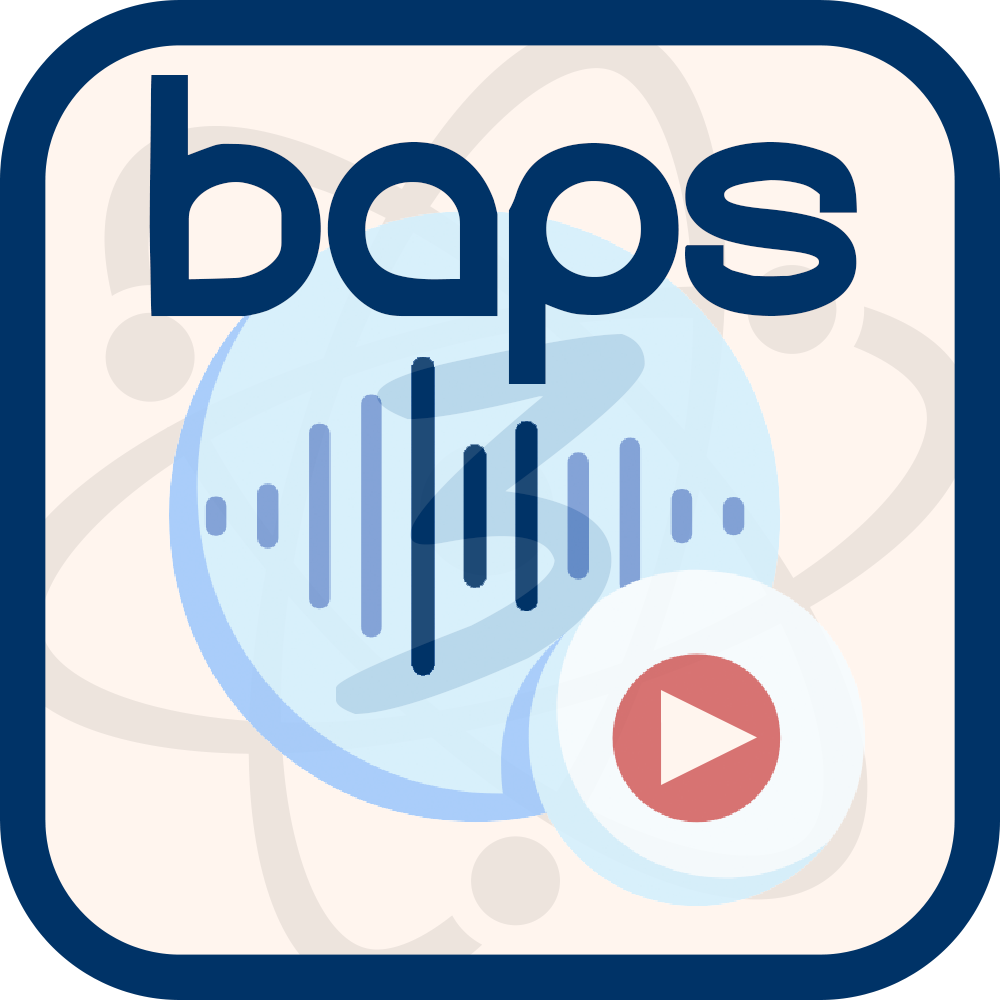
<style>
.page{position:relative;width:1000px;height:1000px;background:#fff5ee}
.page>*{position:absolute;margin:0}
.t1{font:242.8px "roundabout";color:#003367}
</style>
<div class="page">
<p class="t1" style="left:149px;top:75px;width:708px;height:309px">BAPS</p>
</div>
